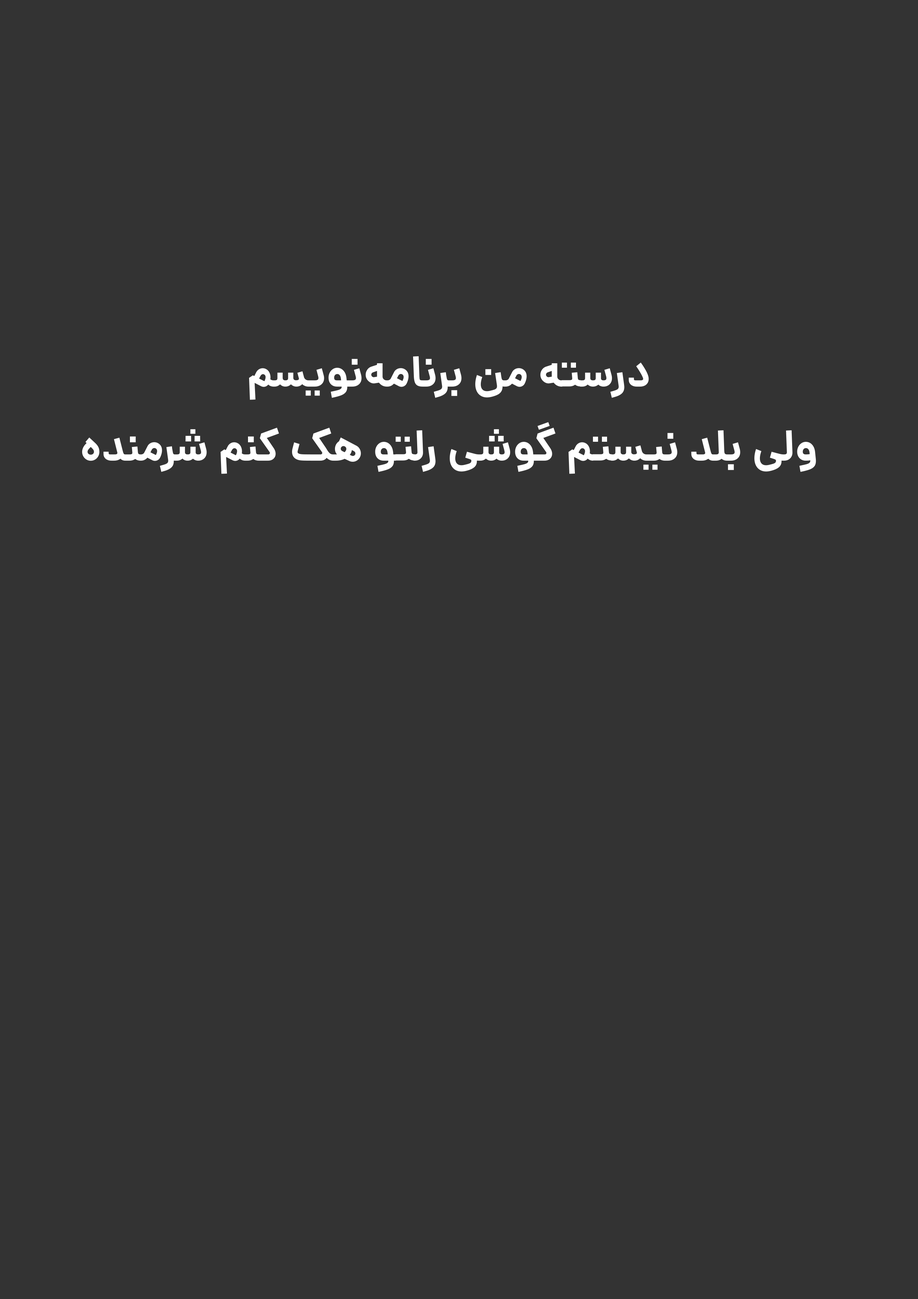
<style>
.page{position:relative;width:918px;height:1299px;background:#333333}
.page>*{position:absolute;margin:0}
.t1{font:43.8px/74px "Dana-Bold";color:#ffffff}
</style>
<div class="page">
<p class="t1" style="left:82px;top:356px;width:734px;height:118px;text-align:center">درسته من برنامه‌نویسم<br>ولی بلد نیستم گوشی رلتو هک کنم شرمنده</p>
</div>
